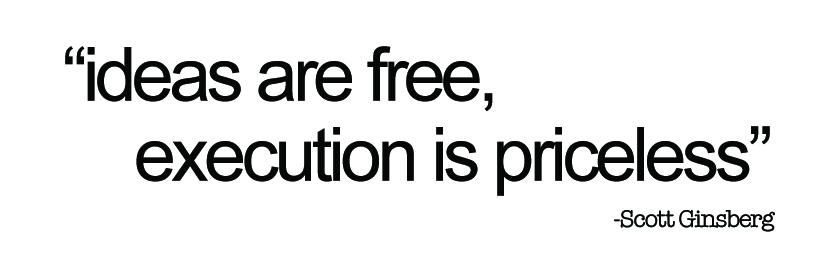
<style>
.page{position:relative;width:823px;height:271px;background:#ffffff}
.page>*{position:absolute;margin:0}
.t1{font:75px "ArialMT";letter-spacing:-0.06em;color:#060808}
.t2{font:25px "AmericanTypewriter";letter-spacing:-0.06em;color:#060808}
</style>
<div class="page">
<p class="t1" style="left:65px;top:46px;width:428px;height:66px">“ideas are free,</p>
<p class="t1" style="left:136px;top:126px;width:634px;height:70px">execution is priceless”</p>
<p class="t2" style="left:614px;top:210px;width:161px;height:22px">-Scott Ginsberg</p>
</div>
